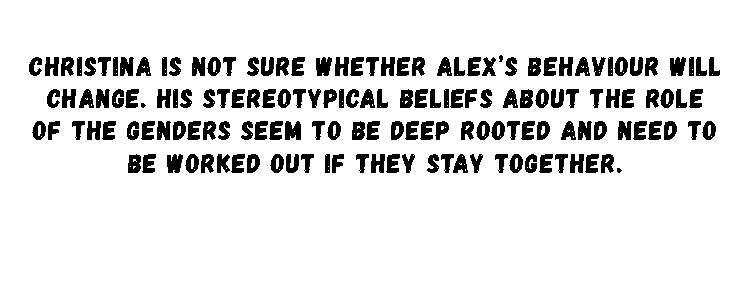
<style>
.page{position:relative;width:750px;height:282px;background:#ffffff}
.page>*{position:absolute;margin:0}
.t1{font:27px "Gagalin-Regular";letter-spacing:0.038em;color:#000000}
</style>
<div class="page">
<p class="t1" style="left:29px;top:55px;width:691px;height:118px;text-align:center">Christina is not sure whether Alex’s behaviour will change. His stereotypical beliefs about the role of the genders seem to be deep rooted and need to be worked out if they stay together.</p>
</div>
